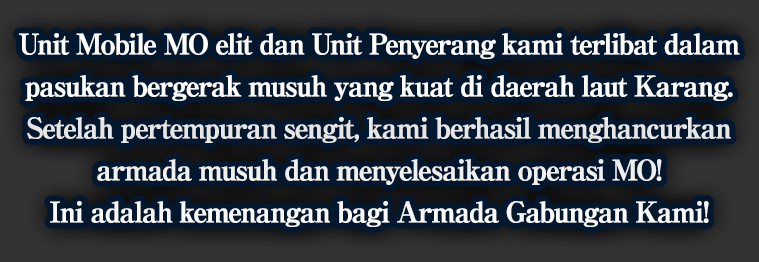
<style>
.page{position:relative;width:759px;height:262px;background:#03172f}
.page>*{position:absolute;margin:0}
.t1{font:28px/42px "RyuminPro-ExBold";letter-spacing:-0.08em;color:#ffffff;font-weight:bold}
</style>
<div class="page">
<p class="t1" style="left:19px;top:33px;width:721px;height:194px;text-align:center">Unit Mobile MO elit dan Unit Penyerang kami terlibat dalam<br>pasukan bergerak musuh yang kuat di daerah laut Karang.<br>Setelah pertempuran sengit, kami berhasil menghancurkan<br>armada musuh dan menyelesaikan operasi MO!<br>Ini adalah kemenangan bagi Armada Gabungan Kami!</p>
</div>
